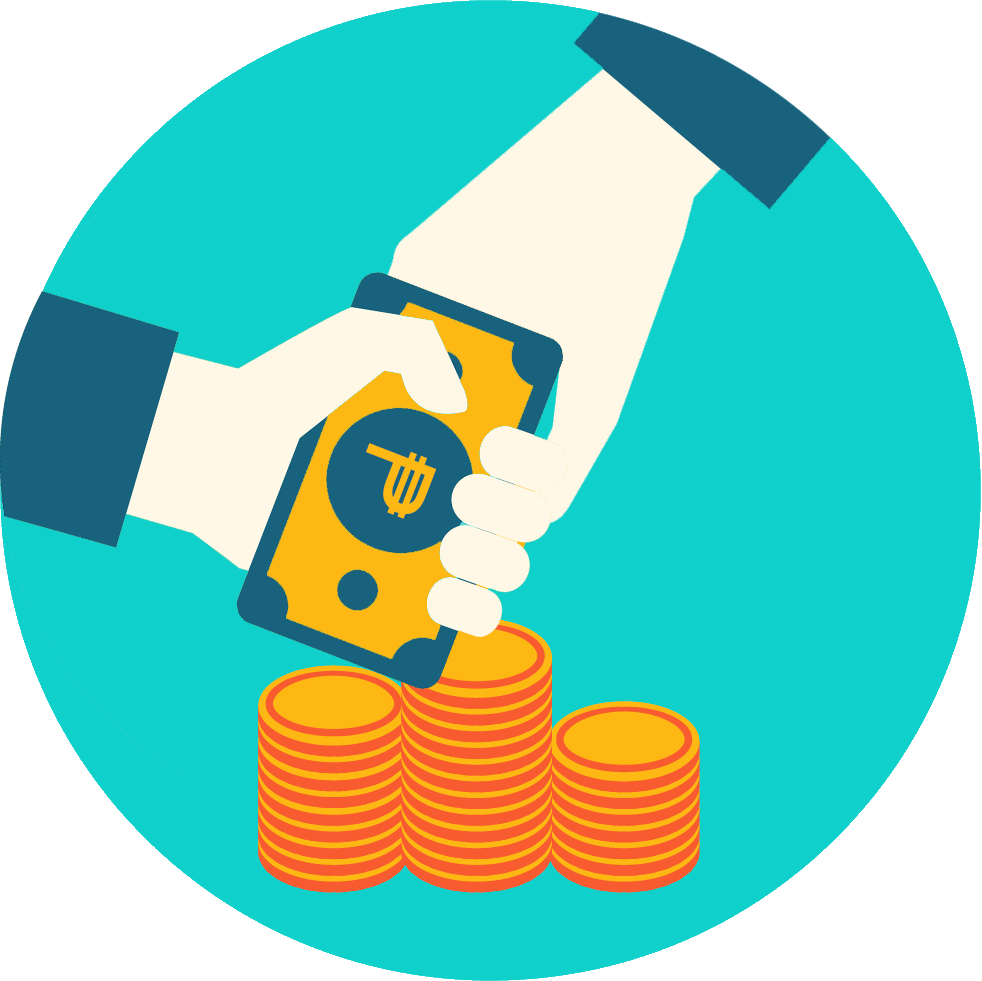
<style>
.page{position:relative;width:982px;height:981px;background:#0fd0ca}
.page>*{position:absolute;margin:0}
.t1{font:100px "ArialMT";color:#fdb813}
</style>
<div class="page">
<p class="t1" style="left:366px;top:443px;width:71px;height:76px;rotate:111deg">₱</p>
</div>
